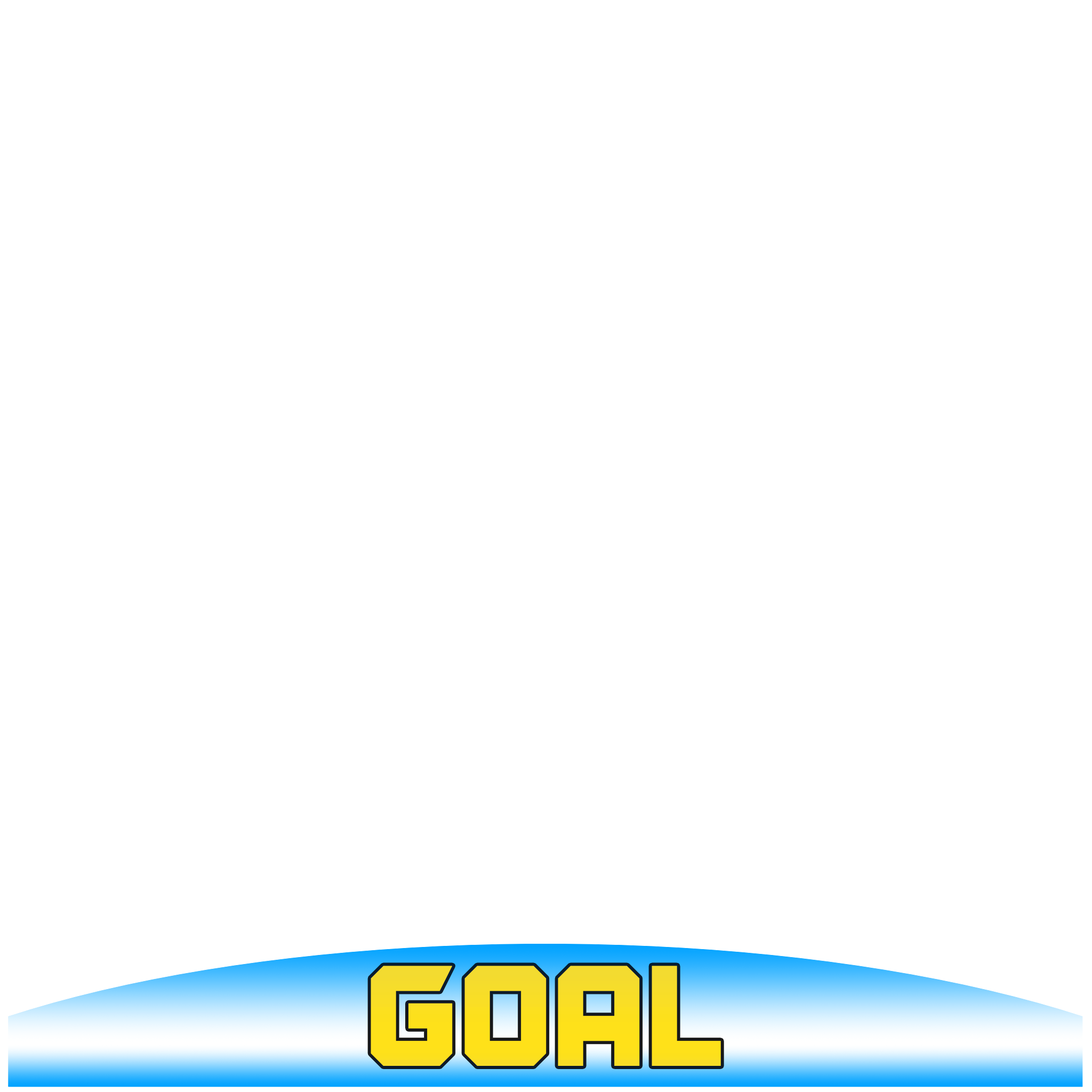
<style>
.page{position:relative;width:1092px;height:1092px;background:#ffffff}
.page>*{position:absolute;margin:0}
.t1{font:128px "RenegadePursuit";color:#fbe020}
</style>
<div class="page">
<p class="t1" style="left:371px;top:966px;width:350px;height:100px">GOAL</p>
</div>
